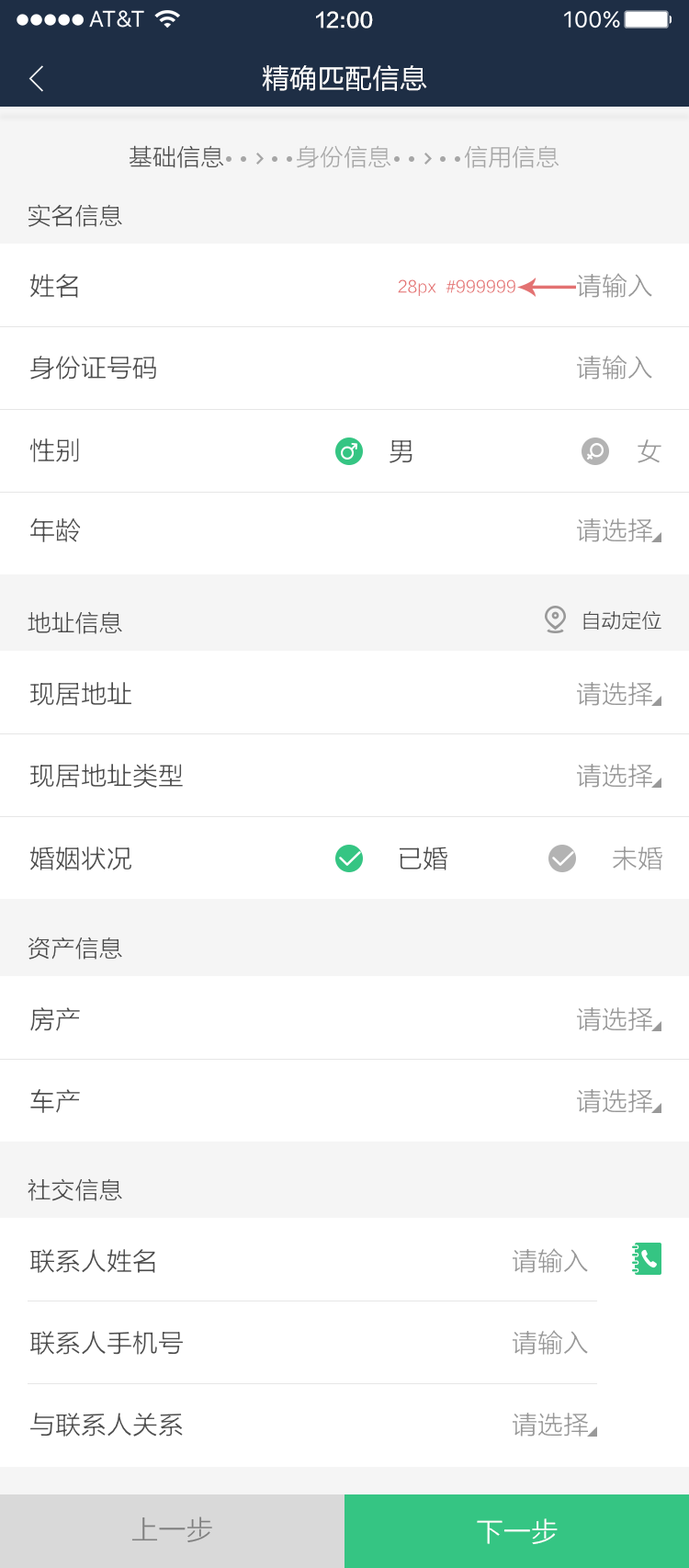
<style>
.page{position:relative;width:689px;height:1568px;background:#ffffff}
.page>*{position:absolute;margin:0}
.t1{font:20.2px "FZLTZHK--GBK1-0";color:#ffffff}
.t2{font:27.6px "FZLTHJW--GB1-0";color:#ffffff}
.t3{font:23.9px "FZLTXHK";color:#4d4d4d}
.t4{font:23.9px "FZLTXHK";color:#a6a6a6}
.t5{font:25.7px "FZLTXHK";color:#4d4d4d}
.t6{font:16.5px "FZLTXHK";color:#e37272}
.t7{font:25.7px "FZLTXHK";color:#999999}
.t8{font:20.2px "FZLTXHK";color:#4d4d4d}
.t9{font:27.6px "FZLTXHK";color:#808080}
.t10{font:27.6px "FZLTXHK";color:#ffffff}
</style>
<div class="page">
<p class="t1" style="left:316px;top:11px;width:57px;height:17px">12:00</p>
<p class="t2" style="left:262px;top:65px;width:165px;height:26px">精确匹配信息</p>
<p class="t3" style="left:129px;top:145px;width:95px;height:23px">基础信息</p>
<p class="t4" style="left:297px;top:145px;width:95px;height:23px">身份信息</p>
<p class="t4" style="left:464px;top:145px;width:96px;height:23px">信用信息</p>
<p class="t3" style="left:28px;top:204px;width:94px;height:23px">实名信息</p>
<p class="t5" style="left:29px;top:274px;width:49px;height:24px">姓名</p>
<p class="t6" style="left:398px;top:279px;width:118px;height:17px">28px  #999999</p>
<p class="t7" style="left:577px;top:273px;width:76px;height:25px">请输入</p>
<p class="t5" style="left:30px;top:356px;width:126px;height:24px">身份证号码</p>
<p class="t7" style="left:577px;top:355px;width:76px;height:25px">请输入</p>
<p class="t5" style="left:29px;top:438px;width:50px;height:24px">性别</p>
<p class="t5" style="left:390px;top:440px;width:23px;height:23px">男</p>
<p class="t7" style="left:638px;top:439px;width:24px;height:24px">女</p>
<p class="t5" style="left:30px;top:518px;width:51px;height:24px">年龄</p>
<p class="t7" style="left:577px;top:518px;width:76px;height:24px">请选择</p>
<p class="t3" style="left:28px;top:611px;width:94px;height:23px">地址信息</p>
<p class="t8" style="left:584px;top:611px;width:78px;height:20px">自动定位</p>
<p class="t5" style="left:30px;top:682px;width:101px;height:24px">现居地址</p>
<p class="t7" style="left:577px;top:682px;width:76px;height:24px">请选择</p>
<p class="t5" style="left:30px;top:764px;width:153px;height:24px">现居地址类型</p>
<p class="t7" style="left:577px;top:764px;width:76px;height:24px">请选择</p>
<p class="t5" style="left:29px;top:846px;width:102px;height:24px">婚姻状况</p>
<p class="t5" style="left:399px;top:846px;width:49px;height:24px">已婚</p>
<p class="t7" style="left:613px;top:846px;width:50px;height:24px">未婚</p>
<p class="t3" style="left:28px;top:937px;width:94px;height:23px">资产信息</p>
<p class="t5" style="left:30px;top:1007px;width:50px;height:24px">房产</p>
<p class="t7" style="left:577px;top:1007px;width:76px;height:24px">请选择</p>
<p class="t5" style="left:30px;top:1089px;width:50px;height:24px">车产</p>
<p class="t7" style="left:577px;top:1089px;width:76px;height:24px">请选择</p>
<p class="t3" style="left:28px;top:1178px;width:94px;height:23px">社交信息</p>
<p class="t5" style="left:30px;top:1249px;width:125px;height:24px">联系人姓名</p>
<p class="t7" style="left:513px;top:1248px;width:75px;height:25px">请输入</p>
<p class="t5" style="left:30px;top:1331px;width:153px;height:24px">联系人手机号</p>
<p class="t7" style="left:513px;top:1330px;width:75px;height:25px">请输入</p>
<p class="t5" style="left:30px;top:1413px;width:153px;height:24px">与联系人关系</p>
<p class="t7" style="left:513px;top:1413px;width:75px;height:24px">请选择</p>
<p class="t9" style="left:131px;top:1517px;width:81px;height:26px">上一步</p>
<p class="t10" style="left:477px;top:1518px;width:81px;height:26px">下一步</p>
</div>
